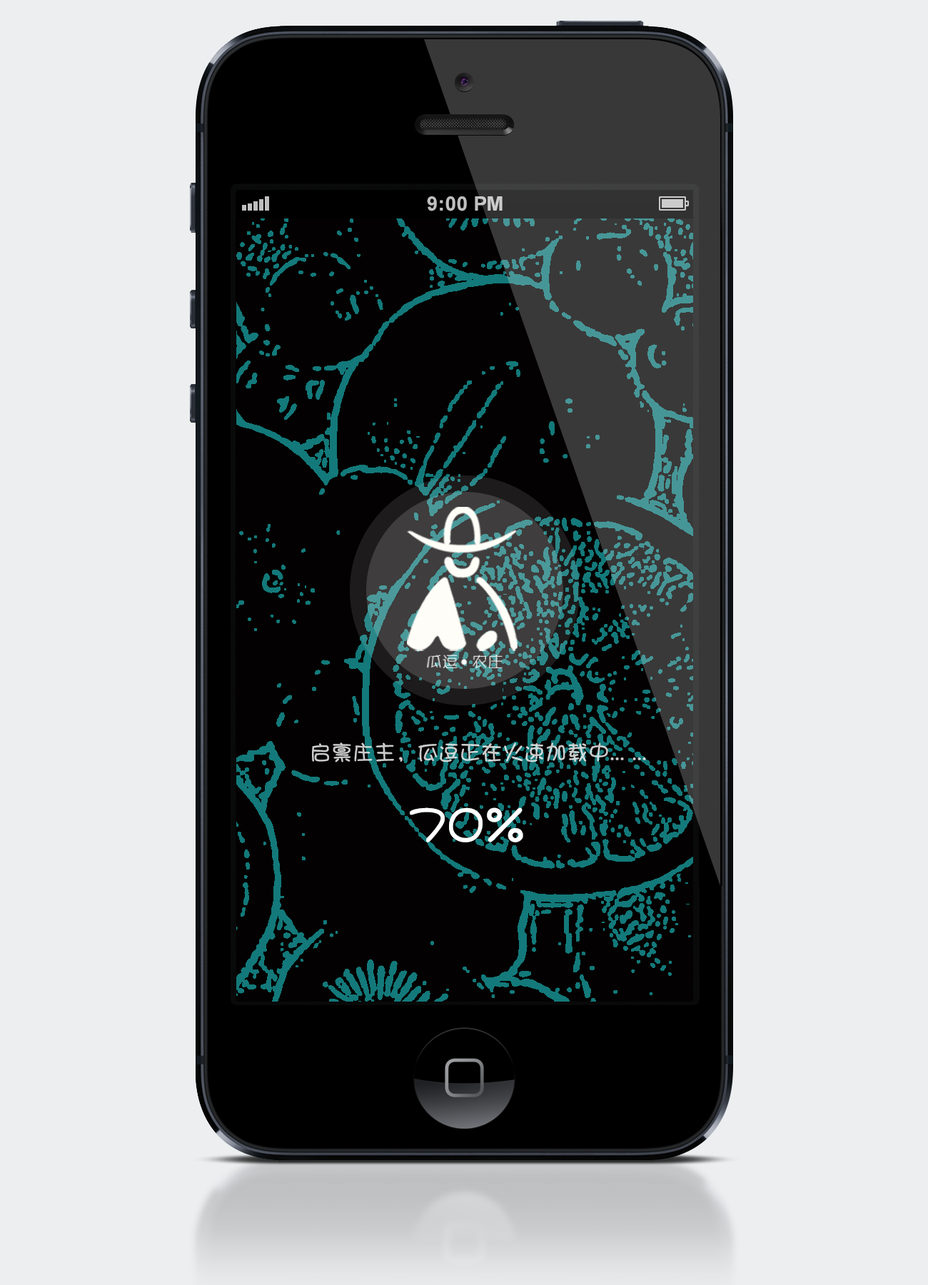
<style>
.page{position:relative;width:928px;height:1285px;background:#eceeef}
.page>*{position:absolute;margin:0}
.t1{font:21.4px "DFPShaoNvW5";color:#cccbcb}
.t2{font:51.4px "DFPShaoNvW5";color:#ffffff}
</style>
<div class="page">
<p class="t1" style="left:312px;top:742px;width:334px;height:20px">启禀庄主，瓜逗正在火速加载中... ...</p>
<p class="t2" style="left:410px;top:807px;width:113px;height:35px">70%</p>
</div>
